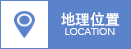
<style>
.page{position:relative;width:131px;height:49px;background:#5b83cb}
.page>*{position:absolute;margin:0}
.t1{font:14.7px "AdobeHeitiStd-Regular";color:#ffffff}
.t2{font:10.7px "DengXian-Regular";color:#ffffff}
</style>
<div class="page">
<p class="t1" style="left:61px;top:12px;width:59px;height:15px">地理位置</p>
<p class="t2" style="left:65px;top:28px;width:50px;height:7px">LOCATION</p>
</div>
